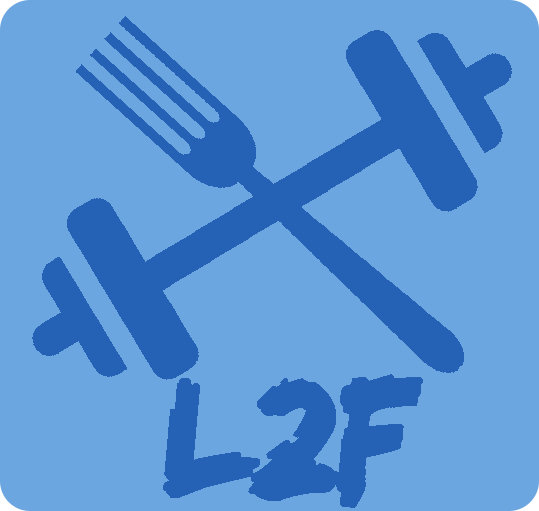
<style>
.page{position:relative;width:539px;height:511px;background:#6ba6e1}
.page>*{position:absolute;margin:0}
.t1{font:165px "EdoSZ";color:#2561b4;font-weight:bold}
</style>
<div class="page">
<p class="t1" style="left:163px;top:374px;width:260px;height:134px">L2F</p>
</div>
